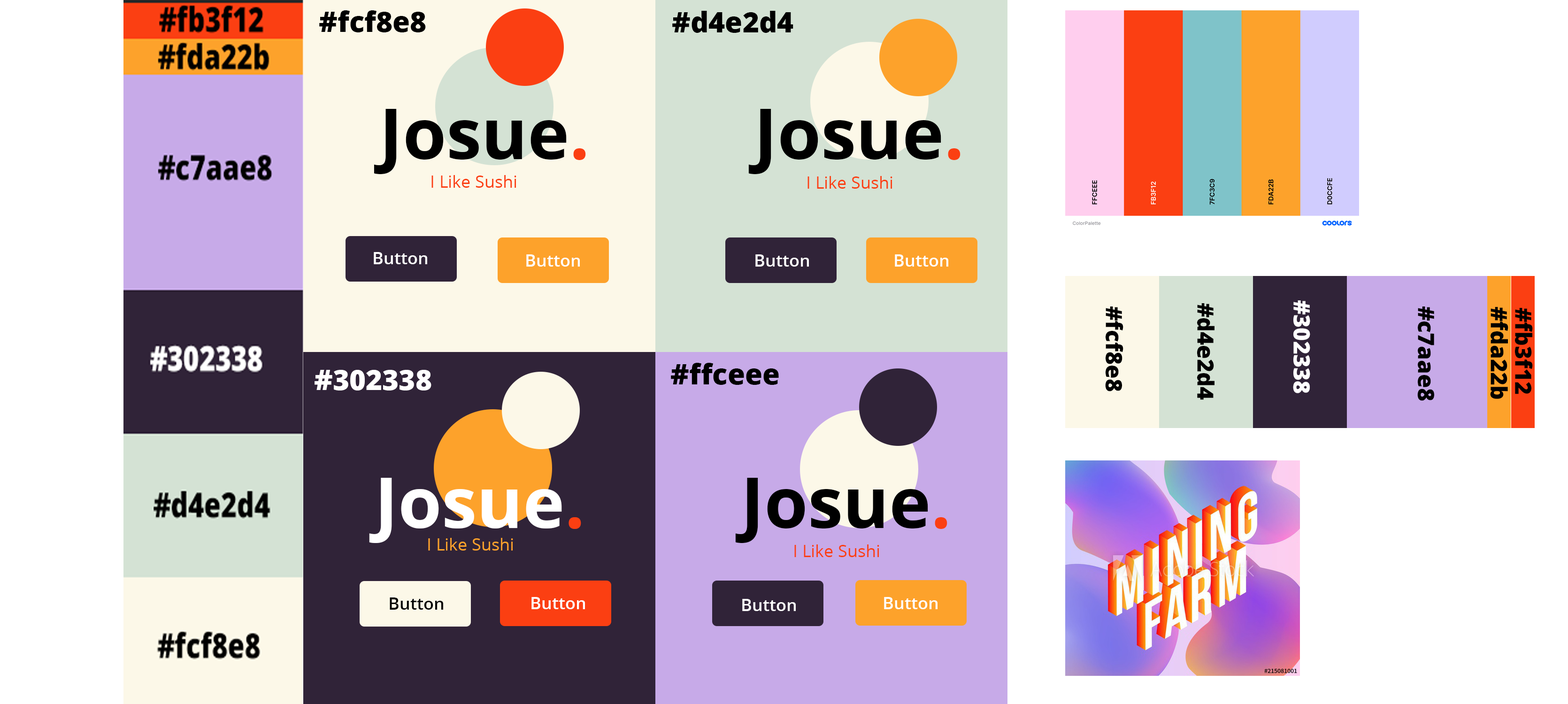
<style>
.page{position:relative;width:1568px;height:704px;background:#ffffff}
.page>*{position:absolute;margin:0}
.t1{font:28.2px "OpenSans-Extrabold";color:#000000}
.t2{font:70.4px "OpenSans-Bold";color:#000000}
.t3{font:70.4px "OpenSans-Bold";color:#fb3f12}
.t4{font:16.9px "OpenSans";color:#fb3f12}
.t5{font:16.9px "OpenSans-Semibold";color:#ffffff}
.t6{font:22.5px "OpenSans-Extrabold";color:#000000}
.t7{font:22.5px "OpenSans-Extrabold";color:#ffffff}
.t8{font:28.2px "OpenSans-Extrabold";color:#ffffff}
.t9{font:70.4px "OpenSans-Bold";color:#ffffff}
.t10{font:16.9px "OpenSans";color:#fda22b}
.t11{font:16.9px "OpenSans-Semibold";color:#000000}
</style>
<div class="page">
<p class="t1" style="left:319px;top:10px;width:107px;height:22px">#fcf8e8</p>
<p class="t1" style="left:672px;top:11px;width:121px;height:22px">#d4e2d4</p>
<p class="t2" style="left:374px;top:109px;width:212px;height:65px">Josue<span class="t3">.</span></p>
<p class="t2" style="left:748px;top:109px;width:213px;height:65px">Josue<span class="t3">.</span></p>
<p class="t4" style="left:431px;top:175px;width:85px;height:13px">I Like Sushi</p>
<p class="t4" style="left:807px;top:176px;width:85px;height:13px">I Like Sushi</p>
<p class="t5" style="left:374px;top:252px;width:53px;height:12px">Button</p>
<p class="t5" style="left:526px;top:254px;width:54px;height:13px">Button</p>
<p class="t5" style="left:755px;top:254px;width:54px;height:13px">Button</p>
<p class="t5" style="left:895px;top:254px;width:53px;height:13px">Button</p>
<p class="t6" style="left:1197px;top:303px;width:17px;height:97px;rotate:90deg">#d4e2d4</p>
<p class="t7" style="left:1293px;top:300px;width:17px;height:93px;rotate:90deg">#302338</p>
<p class="t6" style="left:1105px;top:307px;width:18px;height:85px;rotate:90deg">#fcf8e8</p>
<p class="t6" style="left:1417px;top:307px;width:17px;height:94px;rotate:90deg">#c7aae8</p>
<p class="t6" style="left:1490px;top:307px;width:18px;height:92px;rotate:90deg">#fda22b</p>
<p class="t6" style="left:1515px;top:308px;width:18px;height:86px;rotate:90deg">#fb3f12</p>
<p class="t1" style="left:671px;top:363px;width:108px;height:22px">#ffceee</p>
<p class="t8" style="left:315px;top:370px;width:116px;height:21px">#302338</p>
<p class="t9" style="left:369px;top:478px;width:212px;height:65px">Josue<span class="t3">.</span></p>
<p class="t2" style="left:735px;top:478px;width:212px;height:65px">Josue<span class="t3">.</span></p>
<p class="t10" style="left:428px;top:538px;width:85px;height:13px">I Like Sushi</p>
<p class="t4" style="left:794px;top:545px;width:85px;height:12px">I Like Sushi</p>
<p class="t11" style="left:390px;top:598px;width:53px;height:12px">Button</p>
<p class="t5" style="left:531px;top:597px;width:54px;height:12px">Button</p>
<p class="t5" style="left:742px;top:599px;width:54px;height:12px">Button</p>
<p class="t5" style="left:884px;top:597px;width:54px;height:12px">Button</p>
</div>
